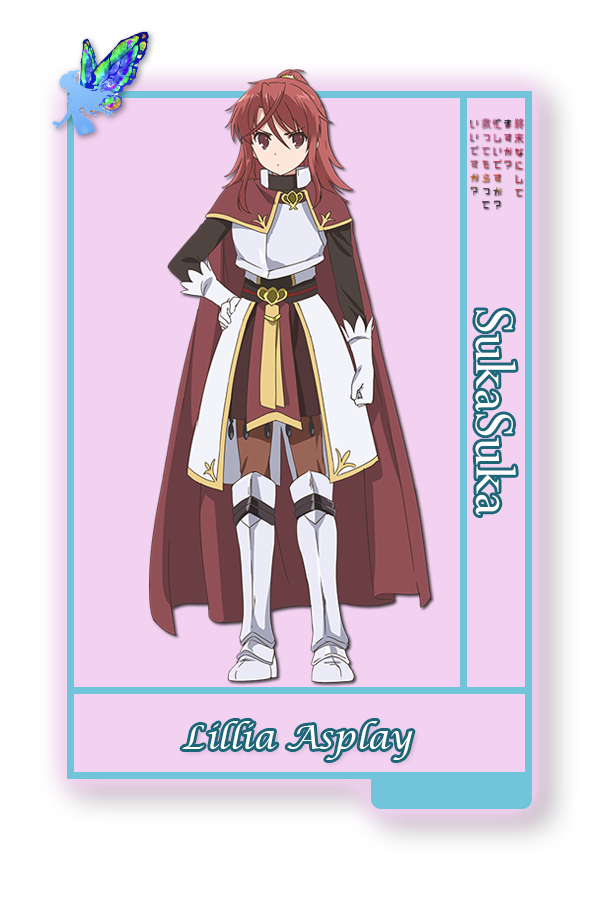
<style>
.page{position:relative;width:600px;height:900px;background:#f3d2f1}
.page>*{position:absolute;margin:0}
.t1{font:62.5px "Perpetua";color:#ffffff}
.t2{font:33.3px "LucidaCalligraphy-Italic";color:#ffffff}
</style>
<div class="page">
<p class="t1" style="left:475px;top:310px;width:41px;height:206px;rotate:90deg">SukaSuka</p>
<p class="t2" style="left:182px;top:721px;width:231px;height:39px">Lillia Asplay</p>
</div>
